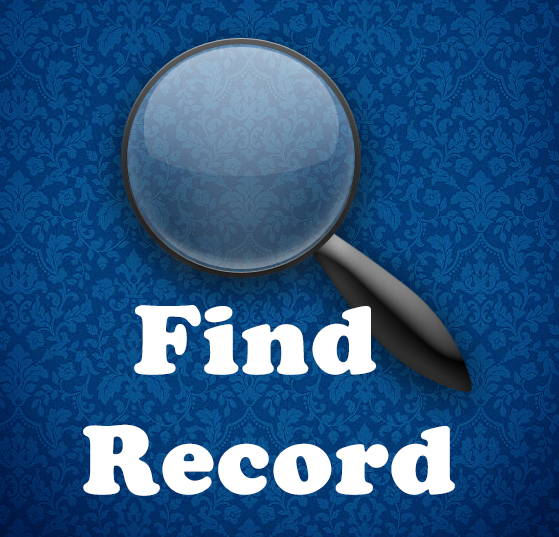
<style>
.page{position:relative;width:559px;height:537px}
.page>*{position:absolute;margin:0}
.t1{font:100px "CooperBlack";color:#ffffff;font-weight:bold}
</style>
<div class="page">
<p class="t1" style="left:83px;top:305px;width:372px;height:191px;text-align:center">Find<br> Record</p>
</div>
